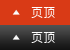
<style>
.page{position:relative;width:70px;height:50px;background:#d93a16}
.page>*{position:absolute;margin:0}
.t1{font:12px "MicrosoftJhengHeiUIRegular";letter-spacing:0.02em;color:#ffffff}
</style>
<div class="page">
<p class="t1" style="left:31px;top:7px;width:24px;height:11px">页顶</p>
<p class="t1" style="left:31px;top:32px;width:24px;height:11px">页顶</p>
</div>
